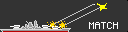
<style>
.page{position:relative;width:128px;height:32px;background:#333333}
.page>*{position:absolute;margin:0}
.t1{font:8.3px "Minecraftia-Regular";color:#ffffff}
</style>
<div class="page">
<p class="t1" style="left:89px;top:22px;width:29px;height:7px">MATCH</p>
</div>
